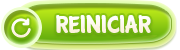
<style>
.page{position:relative;width:180px;height:50px}
.page>*{position:absolute;margin:0}
.t1{font:25px "Cartwheel";color:#ffffff}
</style>
<div class="page">
<p class="t1" style="left:56px;top:15px;width:95px;height:18px">Reiniciar</p>
</div>
